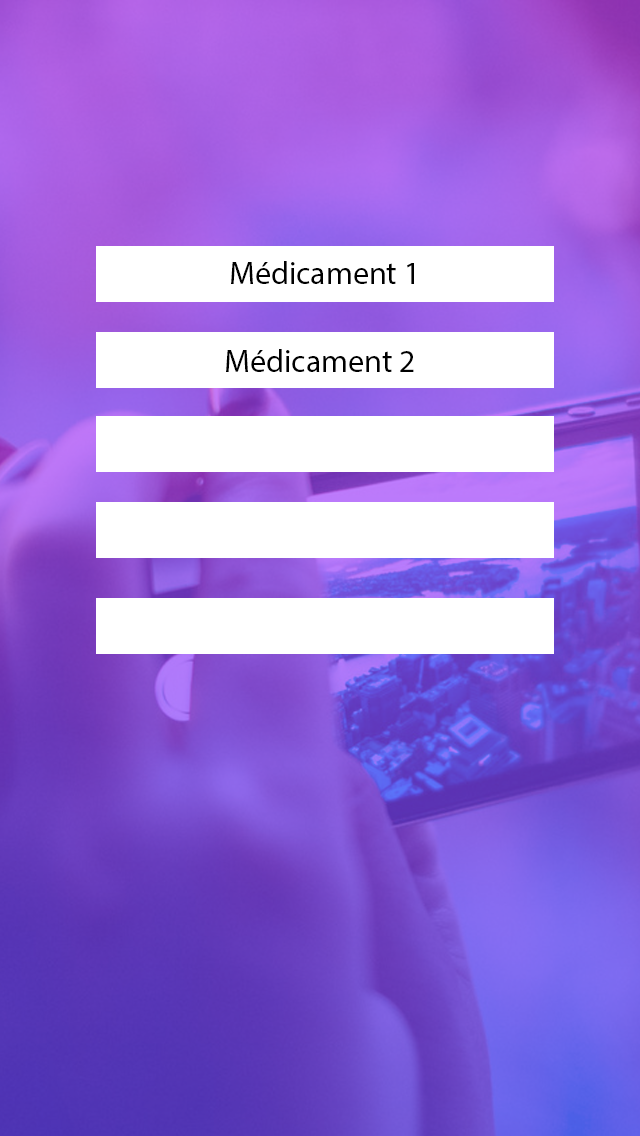
<style>
.page{position:relative;width:640px;height:1136px}
.page>*{position:absolute;margin:0}
.t1{font:32px "MyriadPro-Regular";color:#000000}
</style>
<div class="page">
<p class="t1" style="left:231px;top:261px;width:183px;height:23px">Médicament 1</p>
<p class="t1" style="left:226px;top:349px;width:188px;height:23px">Médicament 2</p>
</div>
